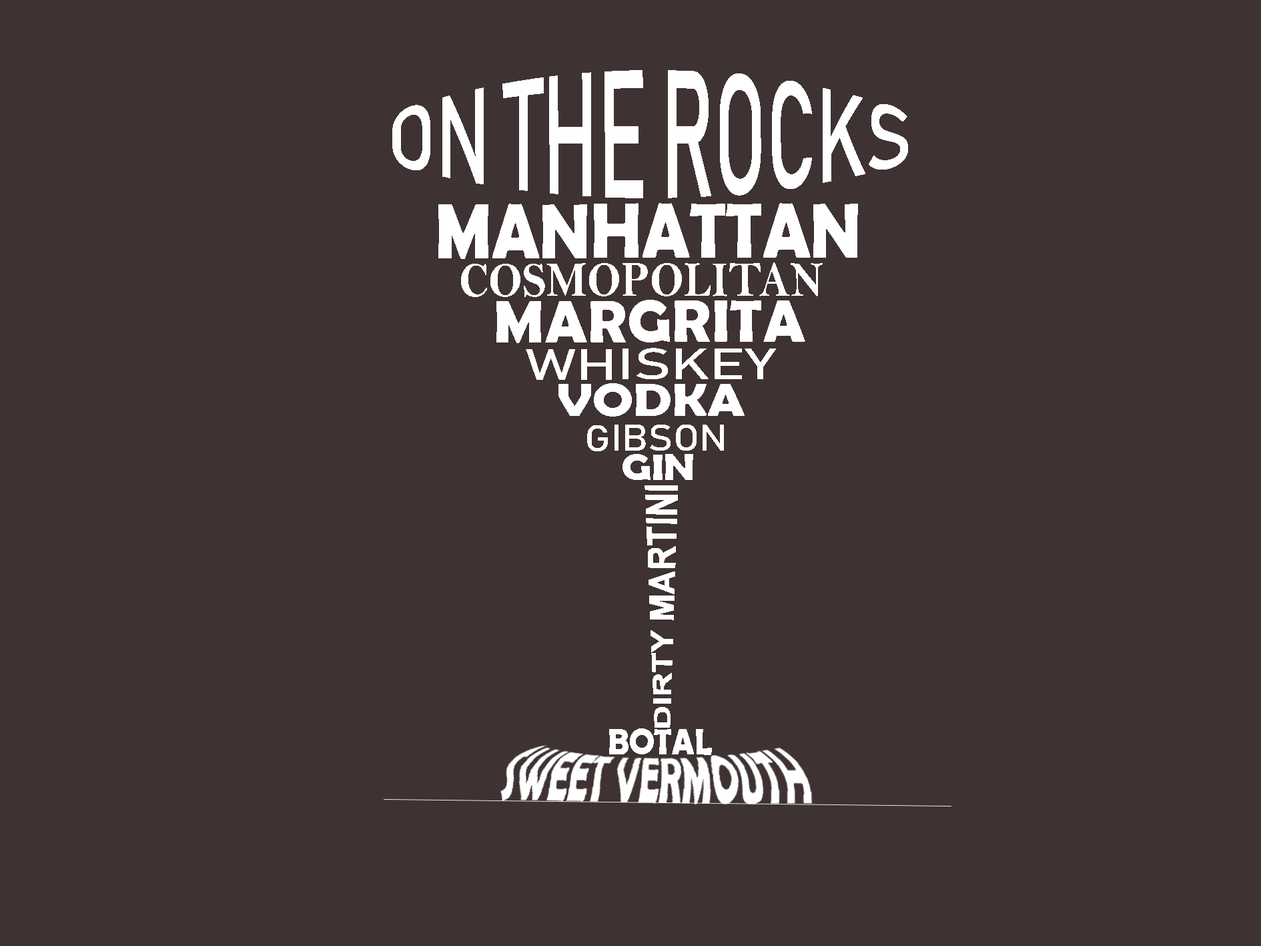
<style>
.page{position:relative;width:1261px;height:946px;background:#3e3232}
.page>*{position:absolute;margin:0}
.t1{font:66.3px "Bahnschrift";color:#ffffff;scale:1.2 1}
.t2{font:78.6px "BerlinSansFBDemi-Bold";color:#ffffff;scale:0.88 1}
.t3{font:49.8px "BellMTBold";color:#ffffff;scale:0.88 1}
.t4{font:60.8px "BerlinSansFBDemi-Bold";color:#ffffff}
.t5{font:43.2px "Bahnschrift";color:#ffffff;scale:1.4 1}
.t6{font:46.7px "BerlinSansFBDemi-Bold";color:#ffffff;scale:1.16 1}
.t7{font:36.4px "Bahnschrift";color:#ffffff;scale:1.12 1}
.t8{font:37.7px "BerlinSansFBDemi-Bold";color:#ffffff;scale:1.12 1}
.t9{font:33.2px "Arial-BoldMT";color:#ffffff}
.t10{font:36.5px "BerlinSansFBDemi-Bold";color:#ffffff;scale:0.91 1}
</style>
<div class="page">
<p class="t1" style="left:392px;top:70px;width:516px;height:128px">ON THE ROCKS</p>
<p class="t2" style="left:438px;top:203px;width:420px;height:56px">MANHATTAN</p>
<p class="t3" style="left:461px;top:262px;width:362px;height:35px">COSMOPOLITAN</p>
<p class="t4" style="left:496px;top:300px;width:309px;height:43px">MARGRITA</p>
<p class="t5" style="left:526px;top:348px;width:250px;height:32px">WHISKEY</p>
<p class="t6" style="left:559px;top:383px;width:186px;height:33px">VODKA</p>
<p class="t7" style="left:587px;top:424px;width:137px;height:27px">GIBSON</p>
<p class="t8" style="left:623px;top:454px;width:70px;height:26px">GIN</p>
<p class="t9" style="left:645px;top:485px;width:33px;height:242px;rotate:-89deg">DIRTY MARTINI</p>
<p class="t10" style="left:609px;top:728px;width:103px;height:27px">BOTAL</p>
</div>
